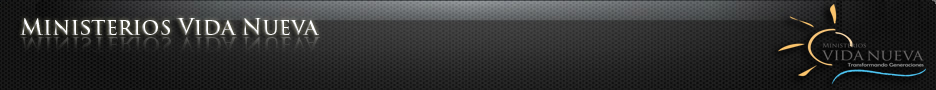
<style>
.page{position:relative;width:936px;height:90px}
.page>*{position:absolute;margin:0}
.t1{font:22px "TrajanPro-Bold";color:#ffffff}
</style>
<div class="page">
<p class="t1" style="left:20px;top:18px;width:299px;height:17px">Ministerios Vida Nueva</p>
</div>
